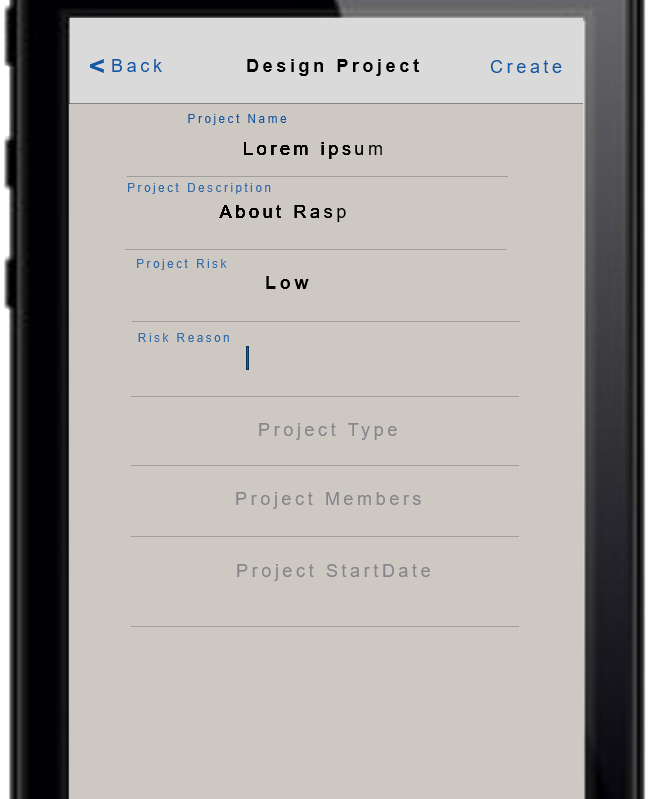
<style>
.page{position:relative;width:657px;height:799px;background:#cdc8c2}
.page>*{position:absolute;margin:0}
.t1{font:30px "SourceSansPro-Bold";letter-spacing:0.2em;color:#115ba4}
.t2{font:18px "ArialMT";letter-spacing:0.2em;color:#115ba4}
.t3{font:18px "Arial-BoldMT";letter-spacing:0.2em;color:#000000}
.t4{font:12px "ArialMT";letter-spacing:0.2em;color:#115ba4}
.t5{font:18px "ArialMT";letter-spacing:0.2em;color:#000000}
.t6{font:12px "ArialMT";letter-spacing:0.2em;color:#326cab}
.t7{font:18px "ArialMT";letter-spacing:0.2em;color:#87868c}
</style>
<div class="page">
<p class="t1" style="left:90px;top:59px;width:14px;height:14px">&lt;</p>
<p class="t2" style="left:112px;top:59px;width:50px;height:13px">Back</p>
<p class="t3" style="left:247px;top:59px;width:172px;height:17px">Design Project</p>
<p class="t2" style="left:490px;top:60px;width:72px;height:13px">Create</p>
<p class="t4" style="left:188px;top:114px;width:99px;height:11px">Project Name</p>
<p class="t5" style="left:244px;top:142px;width:138px;height:17px">Lorem ipsum</p>
<p class="t5" style="left:244px;top:142px;width:119px;height:17px">Lorem ipsu</p>
<p class="t5" style="left:244px;top:142px;width:107px;height:17px">Lorem ips</p>
<p class="t5" style="left:244px;top:142px;width:94px;height:17px">Lorem ip</p>
<p class="t5" style="left:244px;top:142px;width:80px;height:13px">Lorem i</p>
<p class="t5" style="left:244px;top:142px;width:64px;height:13px">Lorem</p>
<p class="t5" style="left:244px;top:142px;width:46px;height:13px">Lore</p>
<p class="t5" style="left:244px;top:142px;width:33px;height:13px">Lor</p>
<p class="t5" style="left:244px;top:142px;width:22px;height:13px">Lo</p>
<p class="t5" style="left:244px;top:142px;width:9px;height:13px">L</p>
<p class="t6" style="left:128px;top:183px;width:143px;height:11px">Project Description</p>
<p class="t5" style="left:219px;top:205px;width:127px;height:17px">About Rasp</p>
<p class="t5" style="left:219px;top:205px;width:113px;height:13px">About Ras</p>
<p class="t5" style="left:219px;top:205px;width:101px;height:13px">About Ra</p>
<p class="t5" style="left:219px;top:205px;width:87px;height:13px">About R</p>
<p class="t5" style="left:219px;top:205px;width:62px;height:13px">About</p>
<p class="t5" style="left:219px;top:205px;width:53px;height:13px">Abou</p>
<p class="t5" style="left:219px;top:205px;width:40px;height:13px">Abo</p>
<p class="t5" style="left:219px;top:205px;width:26px;height:13px">Ab</p>
<p class="t5" style="left:219px;top:205px;width:13px;height:13px">A</p>
<p class="t6" style="left:137px;top:259px;width:90px;height:11px">Project Risk</p>
<p class="t3" style="left:266px;top:276px;width:43px;height:13px">Low</p>
<p class="t6" style="left:138px;top:333px;width:91px;height:9px">Risk Reason</p>
<p class="t7" style="left:259px;top:423px;width:138px;height:17px">Project Type</p>
<p class="t7" style="left:236px;top:492px;width:185px;height:17px">Project Members</p>
<p class="t7" style="left:237px;top:564px;width:193px;height:17px">Project StartDate</p>
</div>
